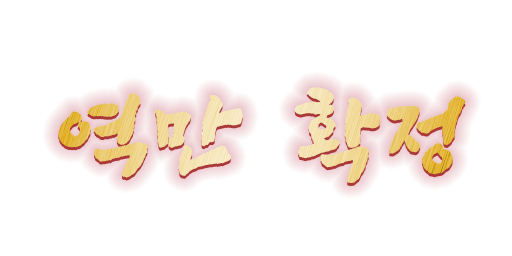
<style>
.page{position:relative;width:512px;height:256px;background:#ffffff}
.page>*{position:absolute;margin:0}
.t1{font:93px "SangSangRockOTF";letter-spacing:0.06em;font-weight:bold}
</style>
<div class="page">
<p class="t1" style="left:58px;top:87px;width:408px;height:96px">역만 확정</p>
</div>
